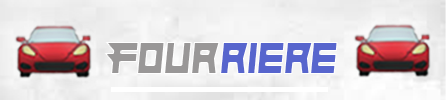
<style>
.page{position:relative;width:446px;height:100px}
.page>*{position:absolute;margin:0}
.t1{font:45.8px "Hindsight2020";color:#999797;scale:0.92 1}
.t2{font:45.8px "Hindsight2020";color:#5765cd;scale:0.92 1}
</style>
<div class="page">
<p class="t1" style="left:104px;top:42px;width:116px;height:32px">Four</p>
<p class="t2" style="left:220px;top:42px;width:118px;height:32px">riere</p>
</div>
